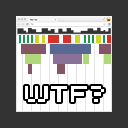
<style>
.page{position:relative;width:128px;height:128px;background:#333333}
.page>*{position:absolute;margin:0}
.t1{font:26px "Uni0553";color:#ffffff}
</style>
<div class="page">
<p class="t1" style="left:25px;top:86px;width:79px;height:16px">WTF?</p>
</div>
